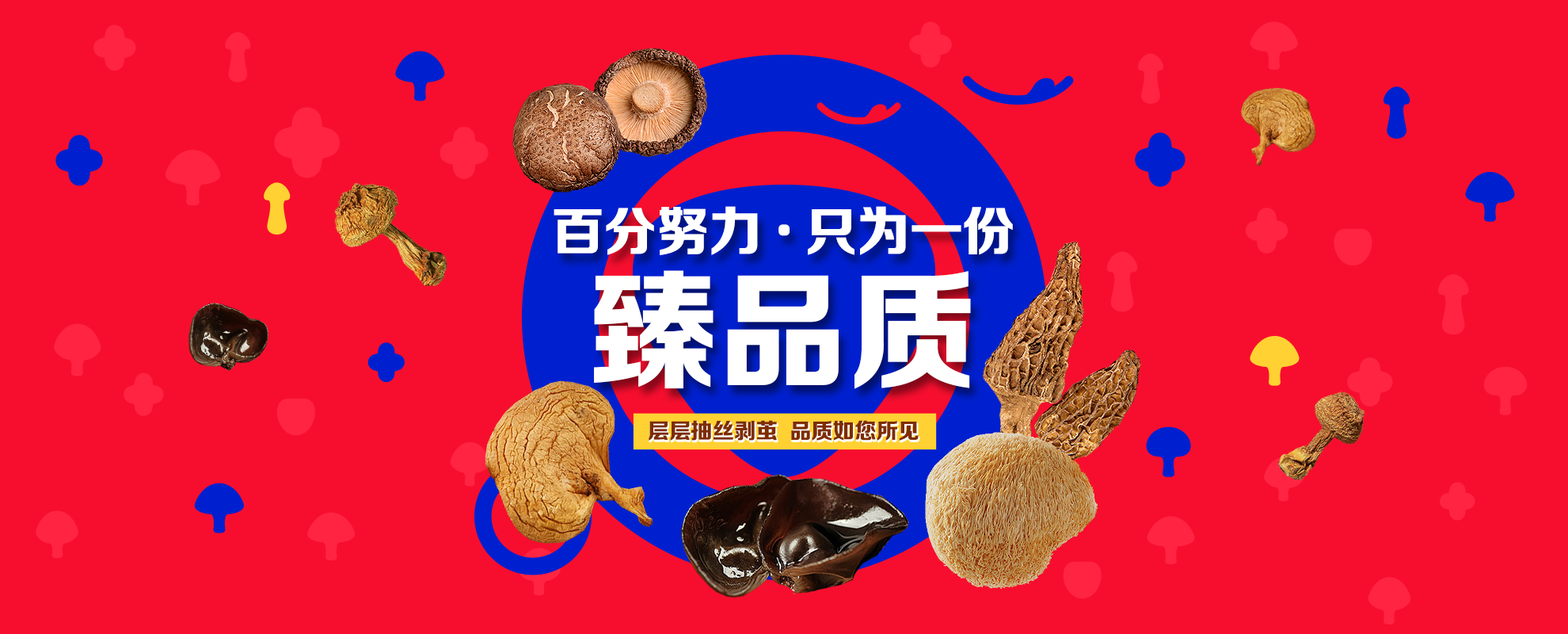
<style>
.page{position:relative;width:1568px;height:634px;background:#f70e2e}
.page>*{position:absolute;margin:0}
.t1{font:53px "FZZDHJW--GB1-0";letter-spacing:-0.009em;color:#ffffff}
.t2{font:130.6px "FZZDHJW--GB1-0";letter-spacing:-0.009em;color:#ffffff}
.t3{font:21.8px "FZZDHJW--GB1-0";letter-spacing:-0.009em;color:#7e2c00}
</style>
<div class="page">
<p class="t1" style="left:554px;top:206px;width:459px;height:49px">百分努力   只为一份</p>
<p class="t2" style="left:594px;top:270px;width:377px;height:119px">臻品质</p>
<p class="t3" style="left:649px;top:420px;width:270px;height:20px">层层抽丝剥茧  品质如您所见</p>
</div>
